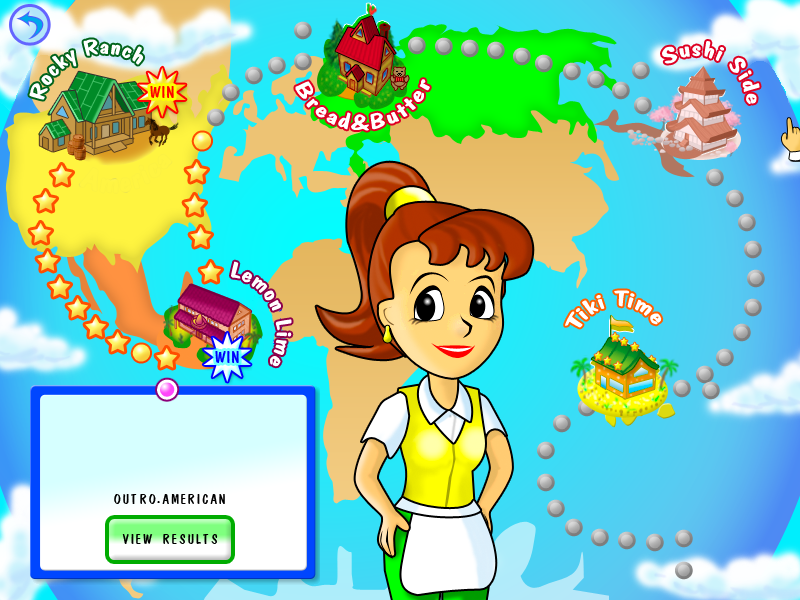
<style>
.page{position:relative;width:800px;height:600px}
.page>*{position:absolute;margin:0}
.t1{font:21.9px "DomCasualBT-Regular";letter-spacing:0.03em;color:#ffffff}
.t2{font:17px "DomCasualBT-Regular";letter-spacing:0.03em;color:#ff0000}
</style>
<div class="page">
<p class="t1" style="left:29px;top:39px;width:115px;height:61px;rotate:-20deg">Rocky Ranch</p>
<p class="t1" style="left:662px;top:41px;width:98px;height:63px;rotate:27deg">Sushi Side</p>
<p class="t2" style="left:150px;top:86px;width:24px;height:12px">WIN</p>
<p class="t1" style="left:295px;top:79px;width:135px;height:52px;rotate:-2deg">Bread&amp;Butter</p>
<p class="t1" style="left:231px;top:261px;width:61px;height:106px;rotate:66deg">Lemon Lime</p>
<p class="t1" style="left:565px;top:290px;width:97px;height:38px;rotate:-3deg">Tiki Time</p>
</div>
